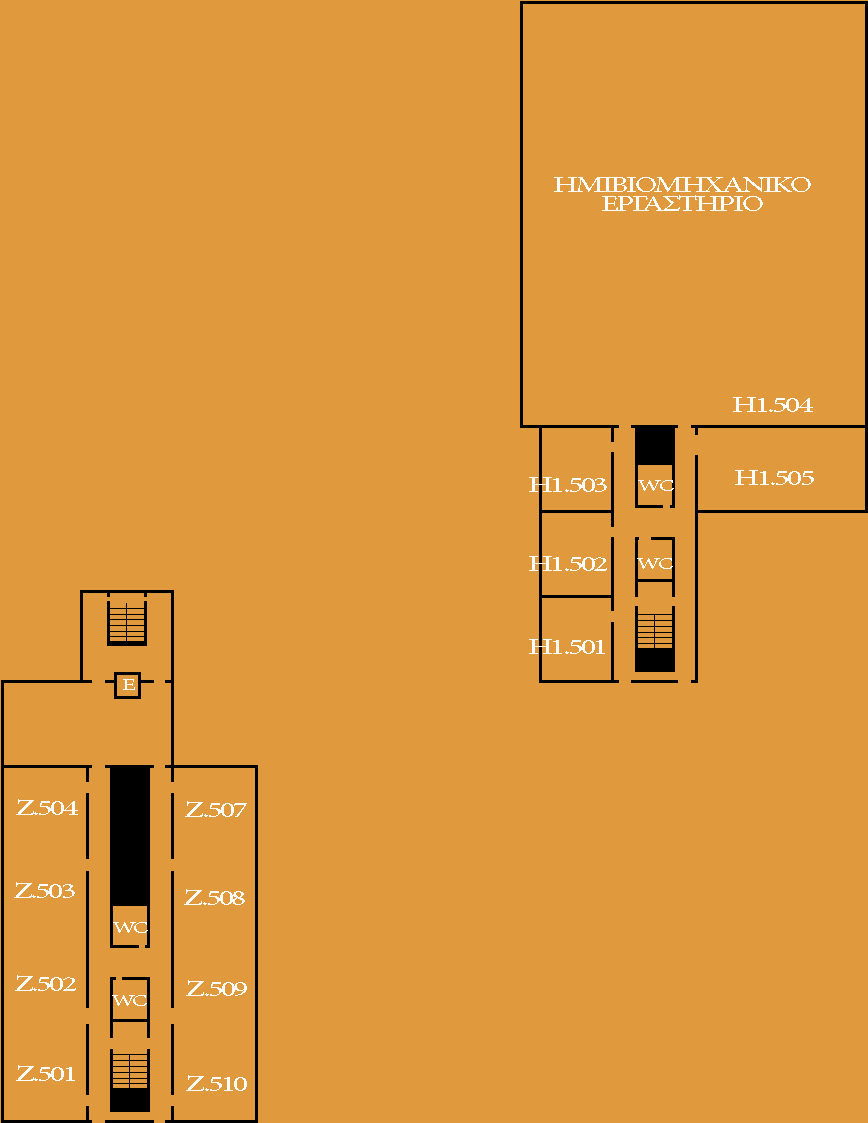
<style>
.page{position:relative;width:868px;height:1123px;background:#e0993d}
.page>*{position:absolute;margin:0}
.t1{font:16.6px "MinionPro-Regular";letter-spacing:-0.08em;color:#ffffff;scale:1.45 1}
.t2{font:22.1px "MinionPro-Regular";letter-spacing:-0.08em;color:#ffffff;scale:1.45 1}
</style>
<div class="page">
<p class="t1" style="left:554px;top:177px;width:257px;height:34px;text-align:center">ΗΜΙΒΙΟΜΗΧΑΝΙΚΟ<br>ΕΡΓΑΣΤΗΡΙΟ</p>
<p class="t1" style="left:733px;top:397px;width:80px;height:15px">Η1.504</p>
<p class="t1" style="left:735px;top:470px;width:79px;height:15px">Η1.505</p>
<p class="t1" style="left:529px;top:477px;width:78px;height:15px">Η1.503</p>
<p class="t1" style="left:638px;top:480px;width:36px;height:11px">WC</p>
<p class="t1" style="left:529px;top:556px;width:78px;height:15px">Η1.502</p>
<p class="t1" style="left:637px;top:558px;width:36px;height:11px">WC</p>
<p class="t1" style="left:529px;top:639px;width:76px;height:15px">Η1.501</p>
<p class="t1" style="left:123px;top:679px;width:12px;height:11px">E</p>
<p class="t2" style="left:16px;top:799px;width:62px;height:16px">Ζ.504</p>
<p class="t1" style="left:185px;top:801px;width:62px;height:16px">Ζ.507</p>
<p class="t1" style="left:14px;top:882px;width:61px;height:16px">Ζ.503</p>
<p class="t1" style="left:184px;top:889px;width:61px;height:16px">Ζ.508</p>
<p class="t1" style="left:113px;top:922px;width:35px;height:11px">WC</p>
<p class="t1" style="left:15px;top:975px;width:61px;height:16px">Ζ.502</p>
<p class="t1" style="left:186px;top:980px;width:61px;height:16px">Ζ.509</p>
<p class="t1" style="left:112px;top:995px;width:35px;height:11px">WC</p>
<p class="t1" style="left:16px;top:1065px;width:59px;height:16px">Ζ.501</p>
<p class="t1" style="left:186px;top:1075px;width:61px;height:16px">Ζ.510</p>
</div>
